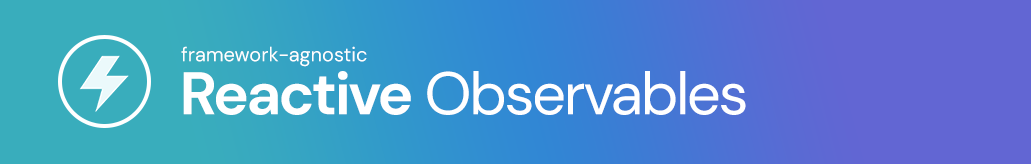
<style>
.page{position:relative;width:1031px;height:164px}
.page>*{position:absolute;margin:0}
.t1{font:20px "DMSans-Regular";color:#ffffff}
.t2{font:60px "DMSans-Regular";letter-spacing:-0.04em;color:#ffffff}
.t3{font:60px "DMSans-Bold";letter-spacing:-0.04em;color:#ffffff}
</style>
<div class="page">
<p class="t1" style="left:181px;top:46px;width:186px;height:21px">framework-agnostic</p>
<p class="t2" style="left:183px;top:71px;width:563px;height:44px"><span class="t3">Reactive</span> Observables</p>
</div>
